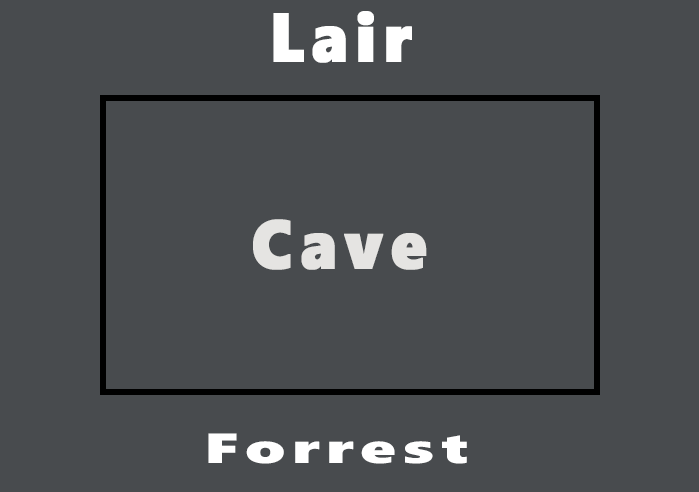
<style>
.page{position:relative;width:699px;height:492px;background:#484b4e}
.page>*{position:absolute;margin:0}
.t1{font:68.5px "SegoeWP-Black";letter-spacing:0.1em;color:#ffffff;font-weight:bold;scale:0.93 1}
.t2{font:68.5px "SegoeWP-Black";letter-spacing:0.1em;color:#e5e4e2;font-weight:bold;scale:0.93 1}
.t3{font:42.2px "SegoeWP-Black";letter-spacing:0.1em;color:#ffffff;scale:1.52 1}
</style>
<div class="page">
<p class="t1" style="left:273px;top:11px;width:139px;height:52px">Lair</p>
<p class="t2" style="left:253px;top:219px;width:174px;height:51px">Cave</p>
<p class="t3" style="left:208px;top:433px;width:259px;height:31px">Forrest</p>
</div>
